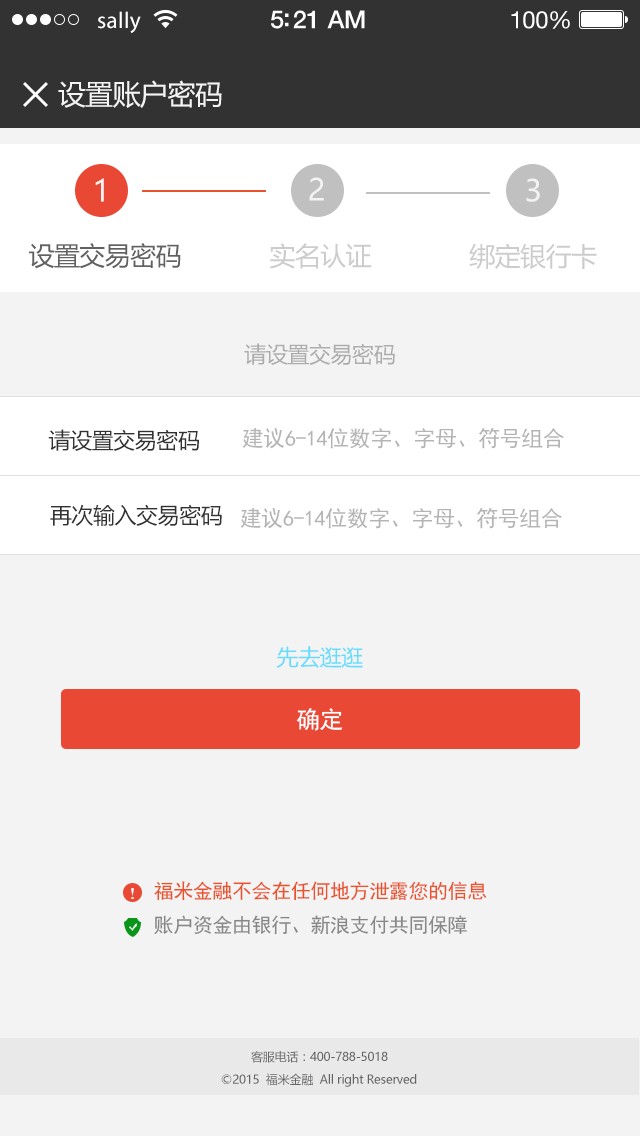
<style>
.page{position:relative;width:640px;height:1136px;background:#f3f3f3}
.page>*{position:absolute;margin:0}
.t1{font:23px "MyriadPro-Regular";letter-spacing:0.02em;color:#ffffff}
.t2{font:25px "HelveticaNeue-Medium";letter-spacing:-0.02em;color:#ffffff}
.t3{font:24px "HelveticaNeue";letter-spacing:-0.02em;color:#ffffff}
.t4{font:28px "MicrosoftYaHei";letter-spacing:-0.02em;color:#f3f3f3}
.t5{font:30px "MicrosoftYaHei";letter-spacing:-0.02em;color:#f3f3f3}
.t6{font:26px "MicrosoftYaHei";letter-spacing:-0.02em;color:#616161}
.t7{font:26px "MicrosoftYaHei";letter-spacing:-0.02em;color:#cccccc}
.t8{font:22px "MicrosoftYaHei";letter-spacing:-0.02em;color:#acacac}
.t9{font:22px "MicrosoftYaHei";letter-spacing:-0.02em;color:#323232}
.t10{font:22px "SimHei";letter-spacing:-0.02em;color:#b4b4b4}
.t11{font:22px "MicrosoftYaHei";letter-spacing:-0.02em;color:#63dcff}
.t12{font:24px "SimHei";letter-spacing:-0.02em;color:#ffffff}
.t13{font:20px "SimHei";letter-spacing:-0.02em;color:#ea522b}
.t14{font:20px "SimHei";letter-spacing:-0.02em;color:#878787}
.t15{font:12px "MicrosoftYaHei";letter-spacing:-0.02em;color:#646464}
</style>
<div class="page">
<p class="t1" style="left:98px;top:11px;width:43px;height:22px">sally</p>
<p class="t2" style="left:271px;top:10px;width:94px;height:19px">5:21 AM</p>
<p class="t3" style="left:511px;top:11px;width:59px;height:18px">100%</p>
<p class="t4" style="left:58px;top:80px;width:164px;height:28px">设置账户密码</p>
<p class="t5" style="left:95px;top:178px;width:9px;height:24px">1</p>
<p class="t5" style="left:309px;top:177px;width:15px;height:24px">2</p>
<p class="t5" style="left:526px;top:178px;width:14px;height:24px">3</p>
<p class="t6" style="left:29px;top:243px;width:152px;height:26px">设置交易密码</p>
<p class="t7" style="left:269px;top:243px;width:103px;height:26px">实名认证</p>
<p class="t7" style="left:469px;top:243px;width:128px;height:26px">绑定银行卡</p>
<p class="t8" style="left:244px;top:343px;width:151px;height:22px">请设置交易密码</p>
<p class="t9" style="left:48px;top:429px;width:151px;height:22px">请设置交易密码</p>
<p class="t10" style="left:242px;top:427px;width:322px;height:22px">建议6-14位数字、字母、符号组合</p>
<p class="t9" style="left:50px;top:504px;width:172px;height:22px">再次输入交易密码</p>
<p class="t10" style="left:240px;top:507px;width:322px;height:22px">建议6-14位数字、字母、符号组合</p>
<p class="t11" style="left:276px;top:646px;width:87px;height:22px">先去逛逛</p>
<p class="t12" style="left:296px;top:708px;width:47px;height:23px">确定</p>
<p class="t13" style="left:154px;top:881px;width:333px;height:20px">福米金融不会在任何地方泄露您的信息</p>
<p class="t14" style="left:154px;top:915px;width:313px;height:20px">账户资金由银行、新浪支付共同保障</p>
<p class="t15" style="left:251px;top:1051px;width:137px;height:12px">客服电话：400-788-5018</p>
<p class="t15" style="left:221px;top:1073px;width:196px;height:14px">©2015  福米金融  All right Reserved</p>
</div>
